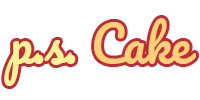
<style>
.page{position:relative;width:200px;height:100px;background:#ffffff}
.page>*{position:absolute;margin:0}
.t1{font:47.9px "Pacifico-Regular";color:#fff195}
.t2{font:47.9px "Pacifico-Regular";color:#ffd078}
</style>
<div class="page">
<p class="t1" style="left:4px;top:18px;width:193px;height:68px">p.s. <span class="t2">Cake</span></p>
</div>
